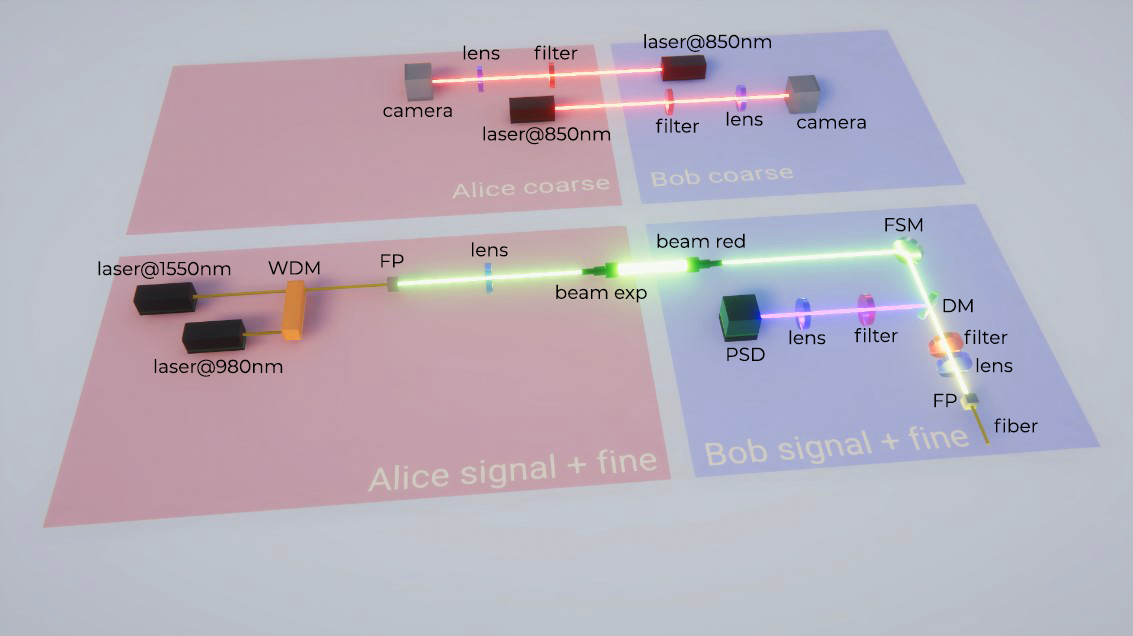
<style>
.page{position:relative;width:1133px;height:636px}
.page>*{position:absolute;margin:0}
.t1{font:18.7px "Montserrat-Regular";color:#000000}
</style>
<div class="page">
<p class="t1" style="left:644px;top:34px;width:127px;height:18px">laser@850nm</p>
<p class="t1" style="left:463px;top:45px;width:37px;height:15px">lens</p>
<p class="t1" style="left:534px;top:45px;width:44px;height:15px">filter</p>
<p class="t1" style="left:383px;top:106px;width:69px;height:11px">camera</p>
<p class="t1" style="left:726px;top:111px;width:37px;height:15px">lens</p>
<p class="t1" style="left:483px;top:126px;width:127px;height:19px">laser@850nm</p>
<p class="t1" style="left:655px;top:118px;width:44px;height:15px">filter</p>
<p class="t1" style="left:797px;top:118px;width:69px;height:11px">camera</p>
<p class="t1" style="left:885px;top:218px;width:38px;height:14px">FSM</p>
<p class="t1" style="left:657px;top:233px;width:88px;height:15px">beam red</p>
<p class="t1" style="left:472px;top:242px;width:36px;height:15px">lens</p>
<p class="t1" style="left:381px;top:254px;width:23px;height:14px">FP</p>
<p class="t1" style="left:98px;top:261px;width:133px;height:18px">laser@1550nm</p>
<p class="t1" style="left:268px;top:261px;width:52px;height:14px">WDM</p>
<p class="t1" style="left:556px;top:284px;width:91px;height:19px">beam exp</p>
<p class="t1" style="left:943px;top:299px;width:30px;height:14px">DM</p>
<p class="t1" style="left:854px;top:328px;width:44px;height:15px">filter</p>
<p class="t1" style="left:964px;top:329px;width:44px;height:15px">filter</p>
<p class="t1" style="left:789px;top:330px;width:37px;height:15px">lens</p>
<p class="t1" style="left:727px;top:347px;width:38px;height:14px">PSD</p>
<p class="t1" style="left:154px;top:359px;width:129px;height:18px">laser@980nm</p>
<p class="t1" style="left:976px;top:358px;width:37px;height:15px">lens</p>
<p class="t1" style="left:934px;top:393px;width:23px;height:15px">FP</p>
<p class="t1" style="left:994px;top:418px;width:44px;height:15px">fiber</p>
</div>
